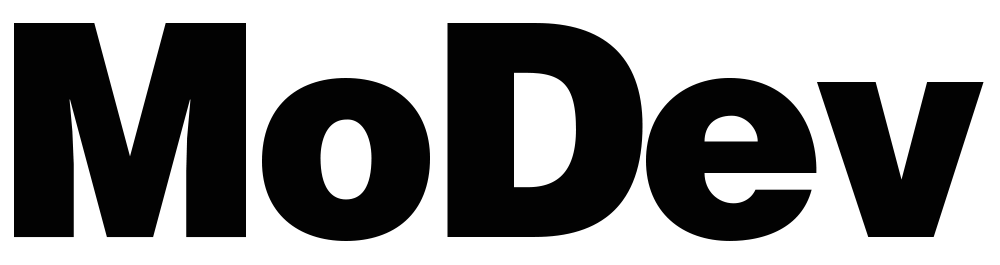
<style>
.page{position:relative;width:1000px;height:265px;background:#ffffff}
.page>*{position:absolute;margin:0}
.t1{font:296.7px "Helvetica-Black";letter-spacing:-0.04em;color:#020202;scale:0.95 1}
</style>
<div class="page">
<p class="t1" style="left:14px;top:23px;width:970px;height:218px">MoDev</p>
</div>
